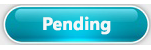
<style>
.page{position:relative;width:151px;height:50px}
.page>*{position:absolute;margin:0}
.t1{font:18px "NirmalaUI-Bold";color:#f3f7f7}
</style>
<div class="page">
<p class="t1" style="left:43px;top:16px;width:68px;height:19px">Pending</p>
</div>
